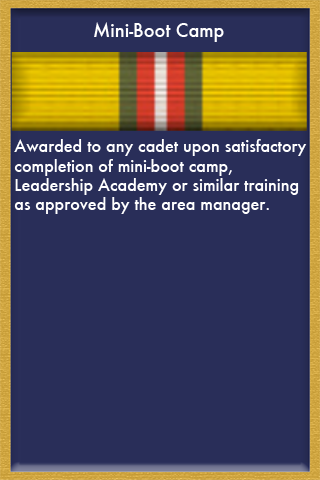
<style>
.page{position:relative;width:320px;height:480px;background:#292e59}
.page>*{position:absolute;margin:0}
.t1{font:18px "Futura-Medium";color:#ffffff}
.t2{font:16px "Futura-Medium";color:#ffffff}
</style>
<div class="page">
<p class="t1" style="left:94px;top:22px;width:130px;height:20px">Mini-Boot Camp</p>
<p class="t2" style="left:14px;top:139px;width:293px;height:75px">Awarded to any cadet upon satisfactory <br>completion of mini-boot camp, <br>Leadership Academy or similar training <br>as approved by the area manager.</p>
</div>
